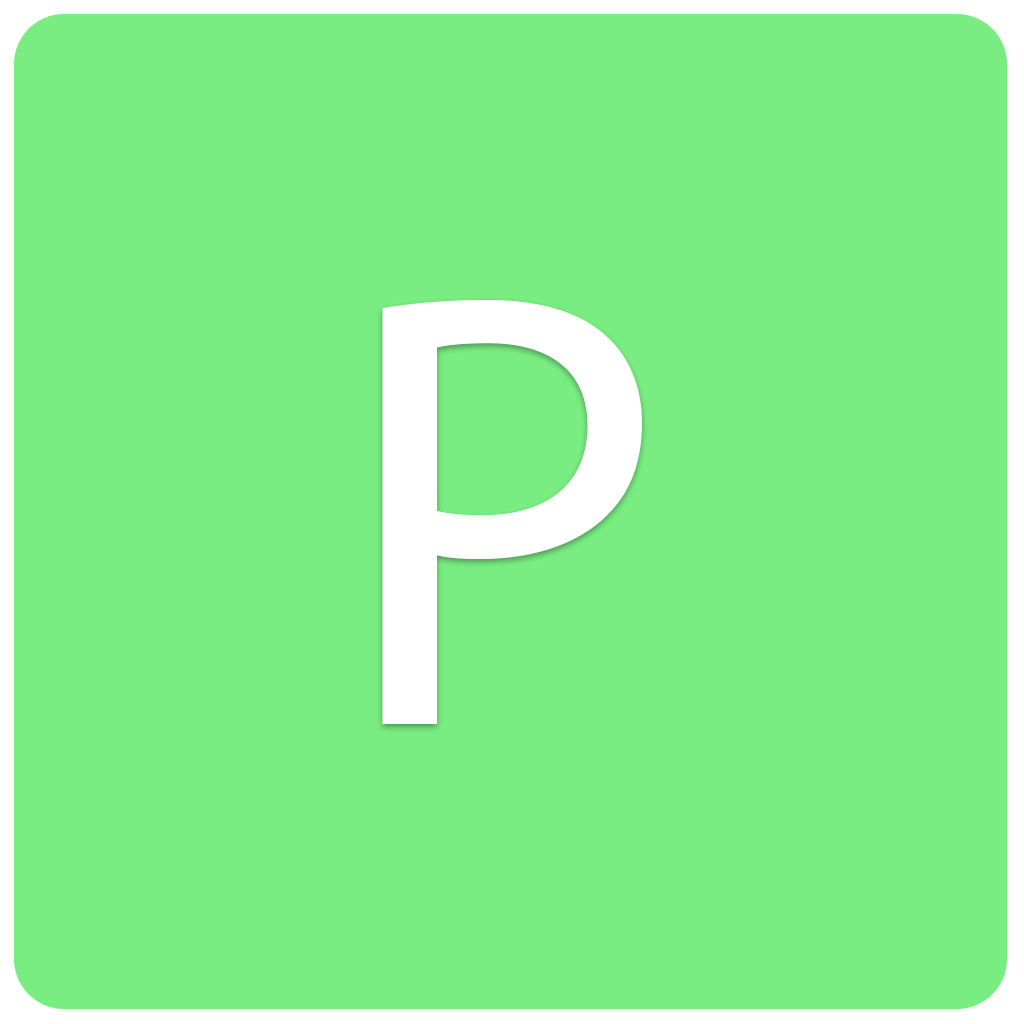
<style>
.page{position:relative;width:1024px;height:1024px;background:#79ed81}
.page>*{position:absolute;margin:0}
.t1{font:625px "MyriadPro-Regular";color:#ffffff}
</style>
<div class="page">
<p class="t1" style="left:382px;top:299px;width:260px;height:425px">P</p>
</div>
